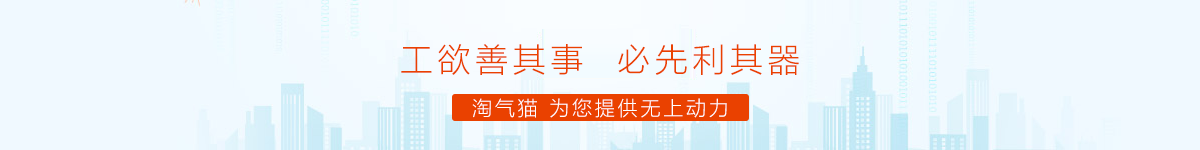
<style>
.page{position:relative;width:1200px;height:150px;background:#f0f9ff}
.page>*{position:absolute;margin:0}
.t1{font:32.9px "MicrosoftYaHeiLight";letter-spacing:0.14em;color:#ea4100;text-transform:uppercase}
.t2{font:20px "MicrosoftYaHeiLight";letter-spacing:0.14em;color:#ffffff;text-transform:uppercase}
</style>
<div class="page">
<p class="t1" style="left:401px;top:44px;width:398px;height:31px">工欲善其事  必先利其器</p>
<p class="t2" style="left:472px;top:98px;width:255px;height:20px">淘气猫 为您提供无上动力</p>
</div>
